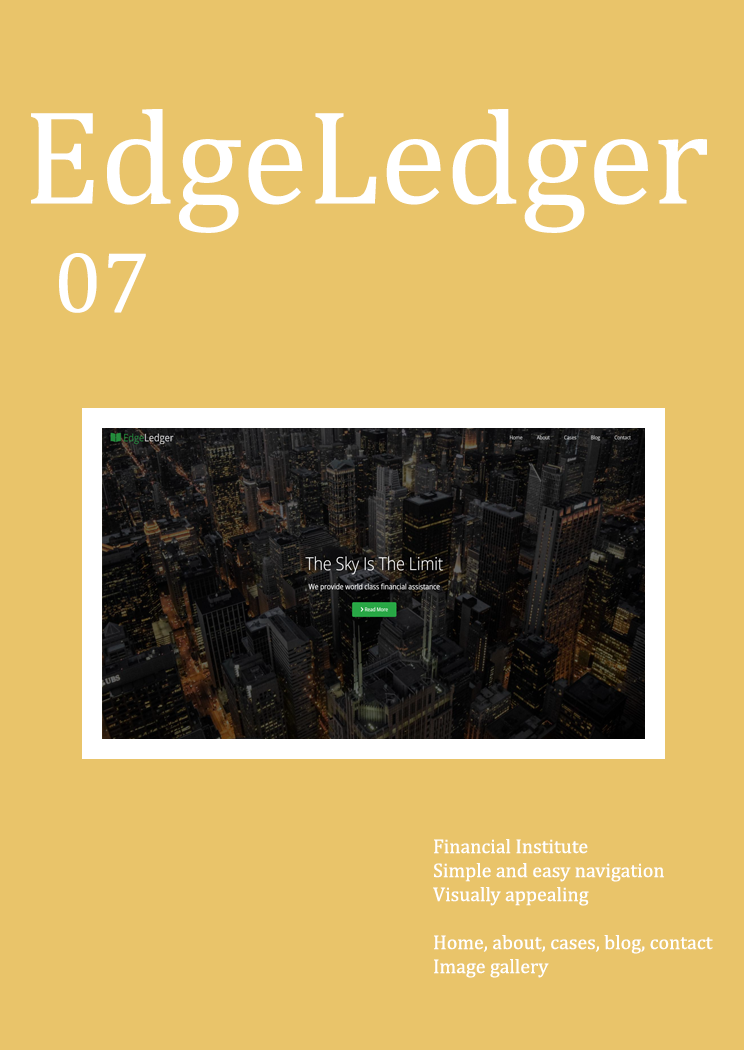
<style>
.page{position:relative;width:744px;height:1050px;background:#e9c46a}
.page>*{position:absolute;margin:0}
.t1{font:135px "Cambria";color:#ffffff}
.t2{font:87.3px "Cambria";color:#ffffff}
.t3{font:20px "Cambria";color:#ffffff}
</style>
<div class="page">
<p class="t1" style="left:31px;top:109px;width:676px;height:124px">EdgeLedger</p>
<p class="t2" style="left:59px;top:253px;width:87px;height:60px">07</p>
<p class="t3" style="left:433px;top:839px;width:280px;height:139px">Financial Institute<br>Simple and easy navigation<br>Visually appealing <br><br>Home, about, cases, blog, contact<br>Image gallery</p>
</div>
